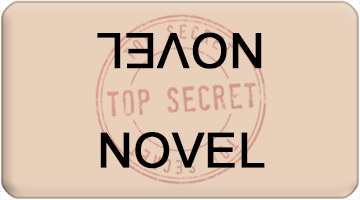
<style>
.page{position:relative;width:360px;height:200px;background:#e8d0bb}
.page>*{position:absolute;margin:0}
.t1{font:48px "ArialMT";color:#000000;font-weight:bold}
</style>
<div class="page">
<p class="t1" style="left:97px;top:32px;width:165px;height:37px;rotate:180deg">NOVEL</p>
<p class="t1" style="left:100px;top:132px;width:165px;height:37px">NOVEL</p>
</div>
